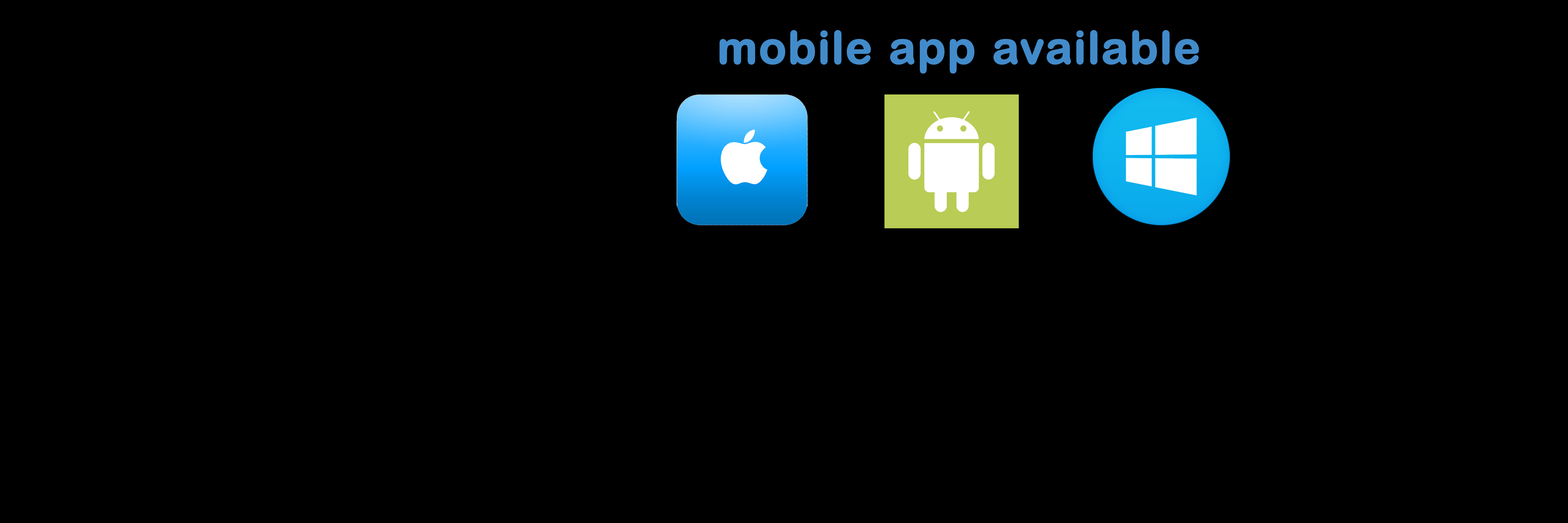
<style>
.page{position:relative;width:1568px;height:523px;background:#000000}
.page>*{position:absolute;margin:0}
.t1{font:45px "ArialRoundedMTBold";letter-spacing:0.035em;color:#428bca;font-weight:bold}
</style>
<div class="page">
<p class="t1" style="left:719px;top:30px;width:480px;height:44px">mobile app available</p>
</div>
